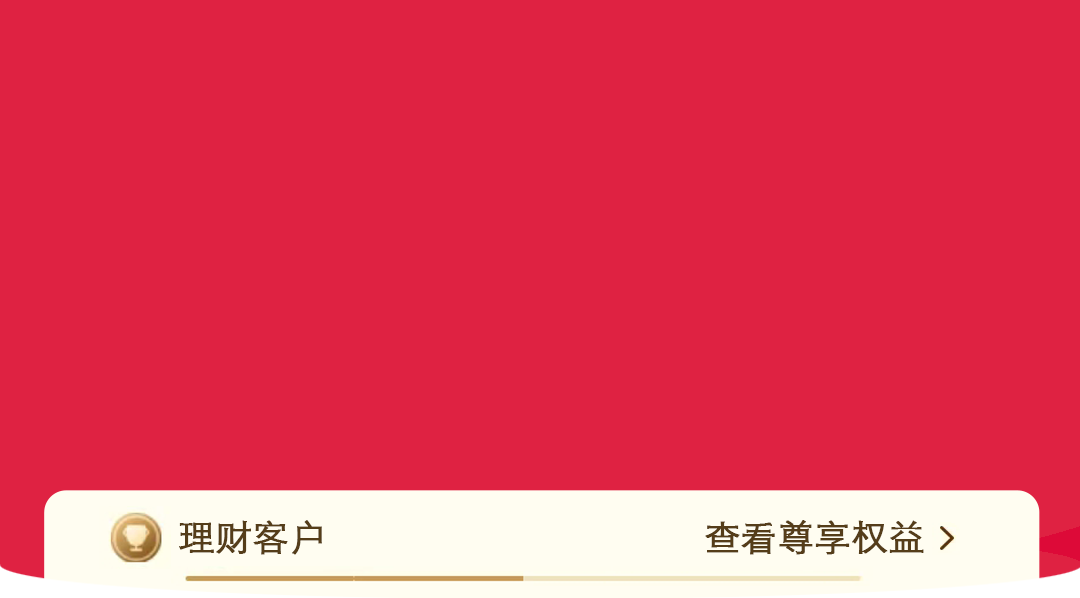
<style>
.page{position:relative;width:1080px;height:598px;background:#df2242}
.page>*{position:absolute;margin:0}
.t1{font:36px "STXihei";color:#553d19;font-weight:bold}
</style>
<div class="page">
<p class="t1" style="left:179px;top:520px;width:143px;height:35px">理财客户</p>
<p class="t1" style="left:705px;top:520px;width:219px;height:35px">查看尊享权益</p>
</div>
